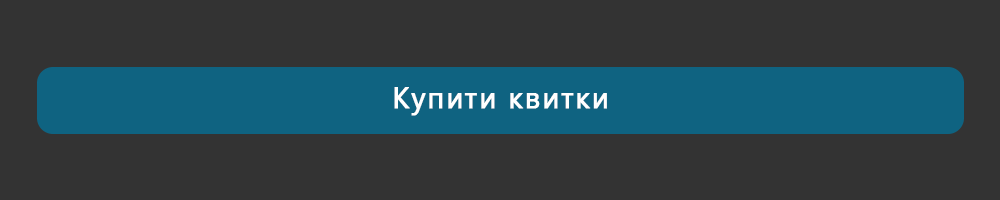
<style>
.page{position:relative;width:1000px;height:200px;background:#333333}
.page>*{position:absolute;margin:0}
.t1{font:30px "SegoeUI";letter-spacing:0.05em;color:#ffffff;font-weight:bold;scale:0.96 1}
</style>
<div class="page">
<p class="t1" style="left:394px;top:87px;width:213px;height:29px">Купити квитки</p>
</div>
